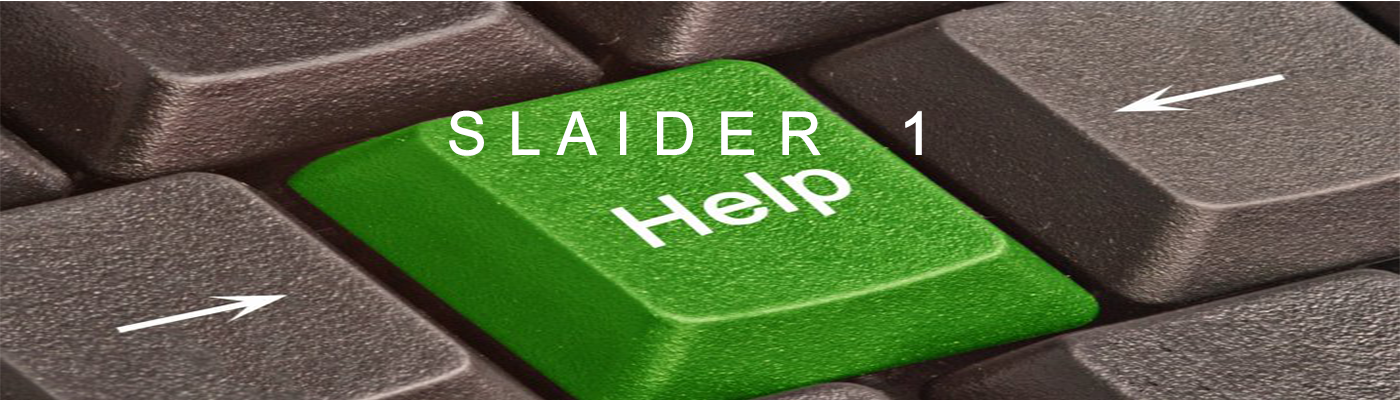
<style>
.page{position:relative;width:1400px;height:400px}
.page>*{position:absolute;margin:0}
.t1{font:60px "ArialMT";letter-spacing:0.01em;color:#ffffff;font-weight:bold}
</style>
<div class="page">
<p class="t1" style="left:449px;top:110px;width:473px;height:46px">S L A I D E R    1</p>
</div>
